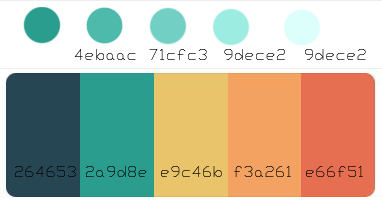
<style>
.page{position:relative;width:382px;height:203px;background:#ffffff}
.page>*{position:absolute;margin:0}
.t1{font:14.7px "Txt"}
.t2{font:14.7px "Txt";color:#010101}
</style>
<div class="page">
<p class="t1" style="left:74px;top:49px;width:62px;height:11px">4ebaac</p>
<p class="t2" style="left:149px;top:49px;width:58px;height:11px">71cfc3</p>
<p class="t1" style="left:224px;top:49px;width:61px;height:11px">9dece2</p>
<p class="t1" style="left:305px;top:49px;width:61px;height:11px">9dece2</p>
<p class="t2" style="left:15px;top:166px;width:61px;height:11px">264653</p>
<p class="t2" style="left:86px;top:166px;width:61px;height:11px">2a9d8e</p>
<p class="t1" style="left:161px;top:166px;width:61px;height:11px">e9c46b</p>
<p class="t2" style="left:234px;top:166px;width:57px;height:11px">f3a261</p>
<p class="t2" style="left:306px;top:166px;width:57px;height:11px">e66f51</p>
</div>
